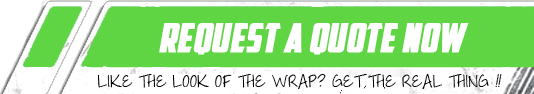
<style>
.page{position:relative;width:534px;height:94px;background:#ffffff}
.page>*{position:absolute;margin:0}
.t1{font:40px "AmericanCaptain";color:#ffffff;text-transform:uppercase;font-weight:bold;font-style:italic}
.t2{font:18px "ThrowMyHandsUpintheAir";letter-spacing:0.025em;color:#000000;text-transform:uppercase}
.t3{font:18px "ThrowMyHandsUpintheAir";letter-spacing:0.025em;color:#000000;text-transform:uppercase;font-style:italic}
</style>
<div class="page">
<p class="t1" style="left:159px;top:23px;width:310px;height:32px">request a quote now</p>
<p class="t2" style="left:97px;top:73px;width:405px;height:16px">like the look of the wrap? get the real thing <span class="t3">!!</span></p>
</div>
